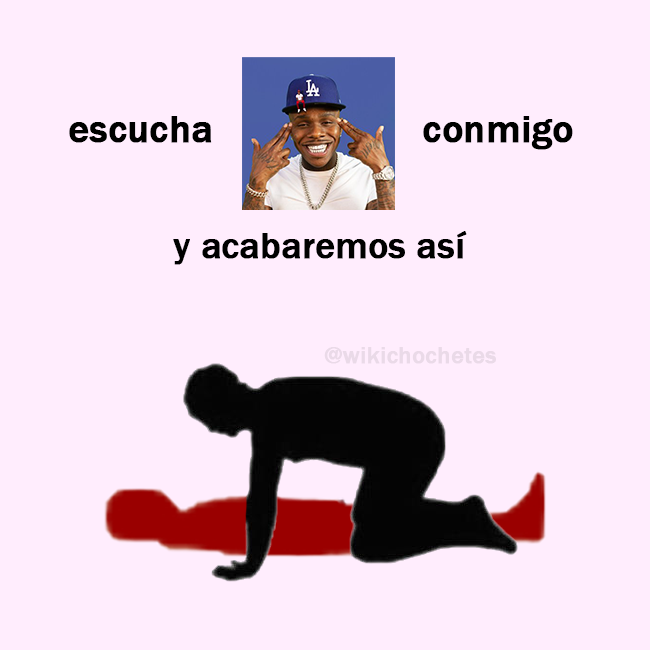
<style>
.page{position:relative;width:650px;height:650px;background:#ffedfd}
.page>*{position:absolute;margin:0}
.t1{font:39px "FranklinGothic-Medium";color:#000000;font-weight:bold}
.t2{font:36.7px "FranklinGothic-Medium";color:#000000;font-weight:bold}
.t3{font:24px "FranklinGothic-Medium";color:#eadae8;font-weight:bold}
</style>
<div class="page">
<p class="t1" style="left:69px;top:116px;width:143px;height:27px">escucha</p>
<p class="t1" style="left:423px;top:116px;width:150px;height:34px">conmigo</p>
<p class="t2" style="left:173px;top:231px;width:294px;height:34px">y acabaremos así</p>
<p class="t3" style="left:324px;top:347px;width:172px;height:17px">@wikichochetes</p>
</div>
